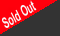
<style>
.page{position:relative;width:60px;height:36px;background:#333333}
.page>*{position:absolute;margin:0}
.t1{font:15px "Arial-BoldMT";color:#f8f6f6;font-style:italic;scale:0.59 1}
</style>
<div class="page">
<p class="t1" style="left:2px;top:0px;width:35px;height:28px">Sold Out</p>
</div>
